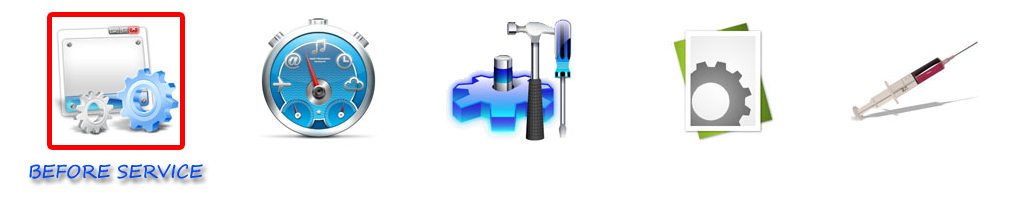
<style>
.page{position:relative;width:1024px;height:200px;background:#ffffff}
.page>*{position:absolute;margin:0}
.t1{font:18px "SegoeScript";color:#0249fe}
</style>
<div class="page">
<p class="t1" style="left:29px;top:164px;width:174px;height:15px">BEFORE SERVICE</p>
</div>
